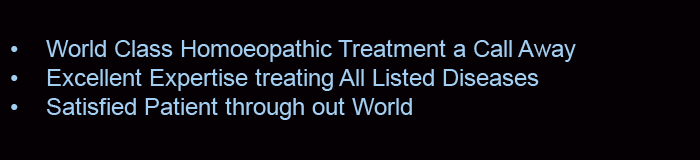
<style>
.page{position:relative;width:700px;height:160px;background:#040003}
.page>*{position:absolute;margin:0}
.t1{font:24px "ArialMT";color:#a2cff1}
</style>
<div class="page">
<p class="t1" style="left:11px;top:39px;width:565px;height:81px">• World Class Homoeopathic Treatment a Call Away<br>• Excellent Expertise treating All Listed Diseases<br>• Satisfied Patient through out World</p>
</div>
